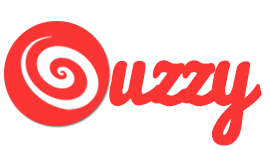
<style>
.page{position:relative;width:270px;height:150px;background:#ffffff}
.page>*{position:absolute;margin:0}
.t1{font:87.3px "Pacifico";color:#fc3434;font-weight:bold}
</style>
<div class="page">
<p class="t1" style="left:109px;top:60px;width:153px;height:86px">uzzy</p>
</div>
